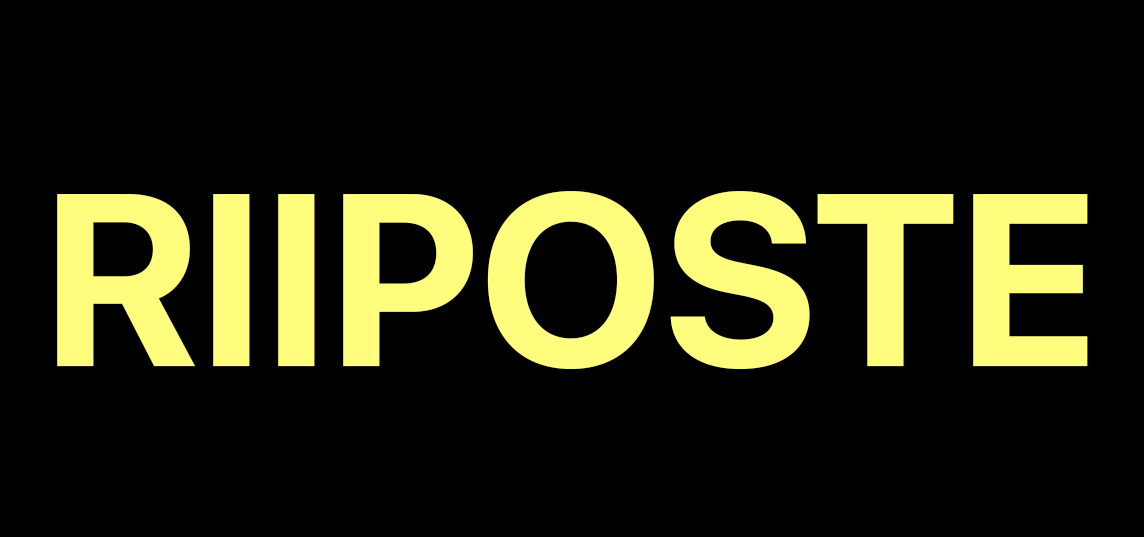
<style>
.page{position:relative;width:1144px;height:537px;background:#000000}
.page>*{position:absolute;margin:0}
.t1{font:244px "SFProDisplay-Bold";color:#fffd7d;text-transform:uppercase}
</style>
<div class="page">
<p class="t1" style="left:57px;top:191px;width:1031px;height:178px">RIIPOSTE</p>
</div>
